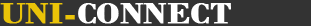
<style>
.page{position:relative;width:311px;height:26px;background:#333333}
.page>*{position:absolute;margin:0}
.t1{font:30px "BodoniMT-Bold";color:#ffffff;font-weight:bold;scale:1.16 1}
.t2{font:30px "BodoniMT-Bold";color:#eac308;font-weight:bold;scale:1.16 1}
</style>
<div class="page">
<p class="t1" style="left:0px;top:3px;width:231px;height:21px"><span class="t2">UNI-</span>CONNECT</p>
</div>
